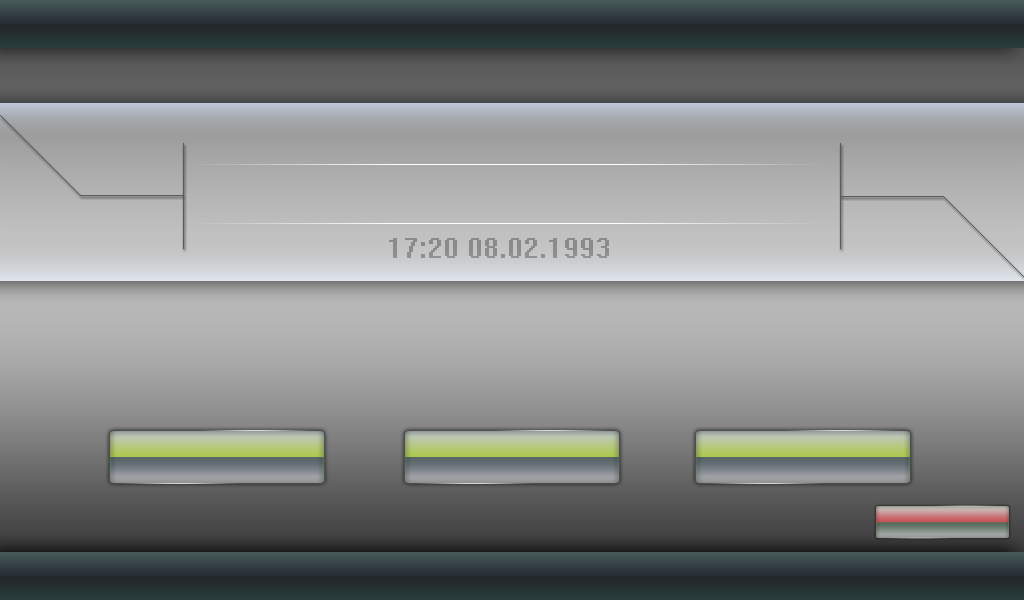
<style>
.page{position:relative;width:1024px;height:600px}
.page>*{position:absolute;margin:0}
.t1{font:30px "System";color:#8b8b8b}
</style>
<div class="page">
<p class="t1" style="left:389px;top:238px;width:220px;height:20px">17:20 08.02.1993</p>
</div>
